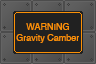
<style>
.page{position:relative;width:96px;height:64px;background:#212121}
.page>*{position:absolute;margin:0}
.t1{font:9px "Helvetica";color:#fb9006}
</style>
<div class="page">
<p class="t1" style="left:16px;top:23px;width:63px;height:20px;text-align:center">WARNING<br>Gravity Camber</p>
</div>
